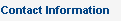
<style>
.page{position:relative;width:121px;height:21px;background:#f5f5f5}
.page>*{position:absolute;margin:0}
.t1{font:11px "Arial-BoldMT";color:#064787}
</style>
<div class="page">
<p class="t1" style="left:1px;top:6px;width:108px;height:8px">Contact Information</p>
</div>
